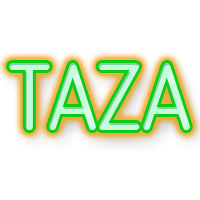
<style>
.page{position:relative;width:200px;height:200px;background:#ffffff}
.page>*{position:absolute;margin:0}
.t1{font:100px "IsonormBecker";color:#c5fade}
</style>
<div class="page">
<p class="t1" style="left:9px;top:63px;width:181px;height:67px">TAZA</p>
</div>
